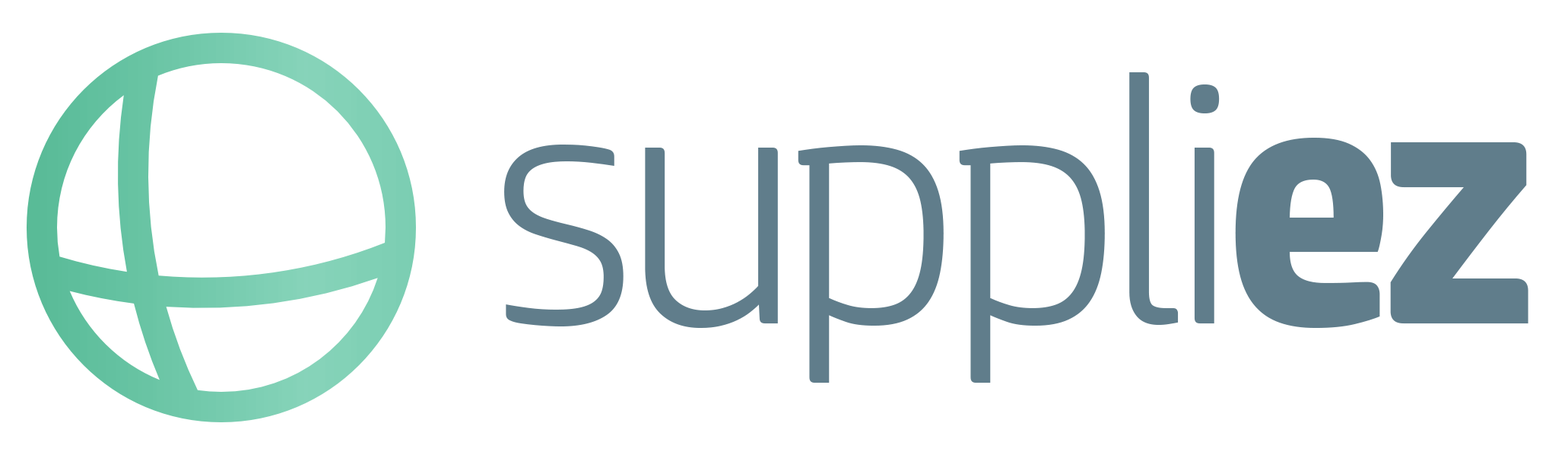
<style>
.page{position:relative;width:1568px;height:455px;background:#ffffff}
.page>*{position:absolute;margin:0}
.t1{font:348.7px "HPSimplified-Light";letter-spacing:-0.05em;color:#607d8b}
.t2{font:348.7px "HPSimplified-Bold";letter-spacing:-0.05em;color:#607d8b}
</style>
<div class="page">
<p class="t1" style="left:504px;top:72px;width:1024px;height:310px">suppli<span class="t2">ez</span></p>
</div>
